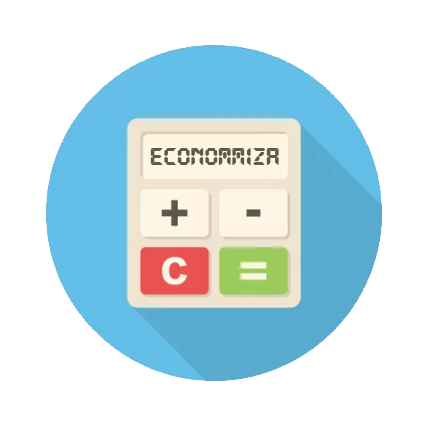
<style>
.page{position:relative;width:430px;height:430px;background:#ffffff}
.page>*{position:absolute;margin:0}
.t1{font:26.7px "DS-Digital-Bold";color:#615849}
</style>
<div class="page">
<p class="t1" style="left:150px;top:147px;width:128px;height:19px">ECONOMMIZAA</p>
<p class="t1" style="left:151px;top:147px;width:128px;height:19px">ECONOMMIZAA</p>
</div>
